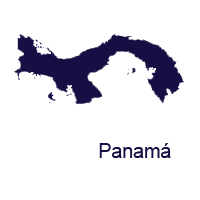
<style>
.page{position:relative;width:200px;height:200px;background:#ffffff}
.page>*{position:absolute;margin:0}
.t1{font:20.8px "ArialMT";color:#170f44;scale:0.94 1}
</style>
<div class="page">
<p class="t1" style="left:99px;top:143px;width:72px;height:15px">Panamá</p>
</div>
